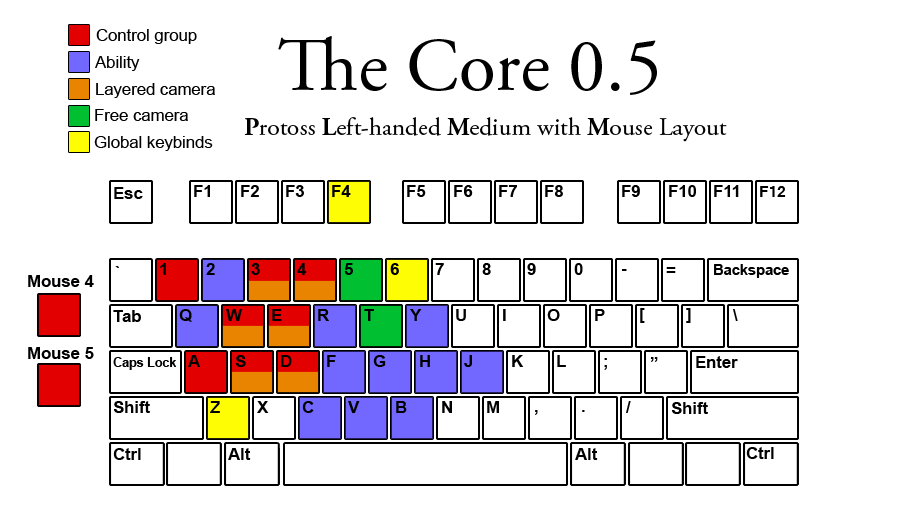
<style>
.page{position:relative;width:897px;height:509px;background:#ffffff}
.page>*{position:absolute;margin:0}
.t1{font:16.7px "ArialMT";color:#000000}
.t2{font:75px "AGaramondPro-Regular";color:#000000}
.t3{font:25px "AGaramondPro-Regular";color:#000000}
.t4{font:25px "AGaramondPro-Bold";color:#000000}
.t5{font:16.7px "Arial-BoldMT";color:#000000;text-transform:uppercase}
.t6{font:16.7px "Arial-BoldMT";color:#000000}
.t7{font:16.7px "Latha-Bold";color:#000000;text-transform:uppercase}
.t8{font:14.6px "Arial-BoldMT";color:#000000}
.t9{font:12.5px "Arial-BoldMT";color:#000000}
</style>
<div class="page">
<p class="t1" style="left:96px;top:29px;width:101px;height:15px">Control group</p>
<p class="t2" style="left:278px;top:36px;width:379px;height:59px">The Core 0.5</p>
<p class="t1" style="left:95px;top:56px;width:45px;height:15px">Ability</p>
<p class="t1" style="left:96px;top:83px;width:119px;height:15px">Layered camera</p>
<p class="t1" style="left:95px;top:109px;width:93px;height:12px">Free camera</p>
<p class="t3" style="left:244px;top:117px;width:483px;height:25px"><span class="t4">P</span>rotoss <span class="t4">L</span>eft-handed <span class="t4">M</span>edium with <span class="t4">M</span>ouse Layout</p>
<p class="t1" style="left:94px;top:136px;width:119px;height:15px">Global keybinds</p>
<p class="t5" style="left:194px;top:185px;width:16px;height:12px">F1</p>
<p class="t5" style="left:241px;top:185px;width:18px;height:12px">F2</p>
<p class="t5" style="left:286px;top:185px;width:18px;height:12px">F3</p>
<p class="t5" style="left:332px;top:185px;width:19px;height:12px">F4</p>
<p class="t5" style="left:407px;top:185px;width:19px;height:12px">F5</p>
<p class="t5" style="left:454px;top:185px;width:19px;height:12px">F6</p>
<p class="t5" style="left:499px;top:185px;width:18px;height:12px">F7</p>
<p class="t5" style="left:545px;top:185px;width:18px;height:12px">F8</p>
<p class="t5" style="left:622px;top:185px;width:18px;height:12px">F9</p>
<p class="t5" style="left:669px;top:185px;width:27px;height:12px">F10</p>
<p class="t5" style="left:714px;top:185px;width:25px;height:12px">F11</p>
<p class="t6" style="left:114px;top:187px;width:29px;height:12px">Esc</p>
<p class="t7" style="left:760px;top:186px;width:26px;height:11px">F12</p>
<p class="t5" style="left:115px;top:266px;width:4px;height:2px">`</p>
<p class="t5" style="left:160px;top:263px;width:6px;height:12px">1</p>
<p class="t5" style="left:206px;top:263px;width:9px;height:12px">2</p>
<p class="t5" style="left:251px;top:263px;width:9px;height:12px">3</p>
<p class="t5" style="left:297px;top:263px;width:10px;height:12px">4</p>
<p class="t5" style="left:344px;top:263px;width:9px;height:12px">5</p>
<p class="t5" style="left:390px;top:263px;width:9px;height:12px">6</p>
<p class="t5" style="left:435px;top:263px;width:9px;height:12px">7</p>
<p class="t5" style="left:482px;top:263px;width:9px;height:12px">8</p>
<p class="t5" style="left:527px;top:263px;width:9px;height:12px">9</p>
<p class="t5" style="left:574px;top:263px;width:9px;height:12px">0</p>
<p class="t5" style="left:622px;top:269px;width:5px;height:2px">-</p>
<p class="t5" style="left:666px;top:267px;width:10px;height:6px">=</p>
<p class="t8" style="left:714px;top:264px;width:75px;height:14px">Backspace</p>
<p class="t6" style="left:28px;top:275px;width:66px;height:12px">Mouse 4</p>
<p class="t6" style="left:113px;top:310px;width:28px;height:12px">Tab</p>
<p class="t5" style="left:179px;top:309px;width:13px;height:13px">Q</p>
<p class="t5" style="left:226px;top:309px;width:16px;height:12px">W</p>
<p class="t5" style="left:272px;top:309px;width:10px;height:12px">E</p>
<p class="t5" style="left:318px;top:309px;width:11px;height:12px">R</p>
<p class="t5" style="left:364px;top:309px;width:10px;height:12px">T</p>
<p class="t5" style="left:410px;top:309px;width:12px;height:12px">Y</p>
<p class="t5" style="left:456px;top:309px;width:10px;height:12px">U</p>
<p class="t5" style="left:503px;top:309px;width:3px;height:12px">I</p>
<p class="t5" style="left:547px;top:309px;width:13px;height:12px">O</p>
<p class="t5" style="left:595px;top:309px;width:10px;height:12px">P</p>
<p class="t5" style="left:640px;top:308px;width:5px;height:15px">[</p>
<p class="t5" style="left:686px;top:308px;width:5px;height:15px">]</p>
<p class="t5" style="left:733px;top:309px;width:5px;height:12px">\</p>
<p class="t6" style="left:28px;top:347px;width:66px;height:12px">Mouse 5</p>
<p class="t9" style="left:113px;top:357px;width:64px;height:13px">Caps Lock</p>
<p class="t5" style="left:188px;top:355px;width:12px;height:12px">A</p>
<p class="t5" style="left:235px;top:355px;width:11px;height:12px">S</p>
<p class="t5" style="left:281px;top:355px;width:11px;height:12px">D</p>
<p class="t5" style="left:327px;top:355px;width:9px;height:12px">F</p>
<p class="t5" style="left:373px;top:355px;width:13px;height:12px">G</p>
<p class="t5" style="left:420px;top:355px;width:10px;height:12px">H</p>
<p class="t5" style="left:464px;top:355px;width:8px;height:12px">J</p>
<p class="t5" style="left:512px;top:355px;width:12px;height:12px">K</p>
<p class="t5" style="left:557px;top:355px;width:9px;height:12px">L</p>
<p class="t5" style="left:604px;top:358px;width:3px;height:12px">;</p>
<p class="t5" style="left:651px;top:357px;width:7px;height:5px">”</p>
<p class="t6" style="left:696px;top:356px;width:42px;height:12px">Enter</p>
<p class="t6" style="left:113px;top:401px;width:37px;height:12px">Shift</p>
<p class="t5" style="left:210px;top:401px;width:10px;height:12px">Z</p>
<p class="t5" style="left:257px;top:401px;width:12px;height:12px">X</p>
<p class="t5" style="left:302px;top:401px;width:12px;height:12px">C</p>
<p class="t5" style="left:348px;top:401px;width:12px;height:12px">V</p>
<p class="t5" style="left:396px;top:401px;width:11px;height:12px">B</p>
<p class="t5" style="left:442px;top:401px;width:10px;height:12px">N</p>
<p class="t5" style="left:487px;top:401px;width:12px;height:12px">M</p>
<p class="t5" style="left:626px;top:401px;width:5px;height:12px">/</p>
<p class="t5" style="left:535px;top:410px;width:3px;height:5px">,</p>
<p class="t5" style="left:582px;top:410px;width:3px;height:2px">.</p>
<p class="t6" style="left:671px;top:402px;width:37px;height:12px">Shift</p>
<p class="t6" style="left:113px;top:448px;width:28px;height:12px">Ctrl</p>
<p class="t6" style="left:228px;top:448px;width:23px;height:12px">Alt</p>
<p class="t6" style="left:575px;top:448px;width:23px;height:12px">Alt</p>
<p class="t6" style="left:746px;top:447px;width:28px;height:12px">Ctrl</p>
</div>
